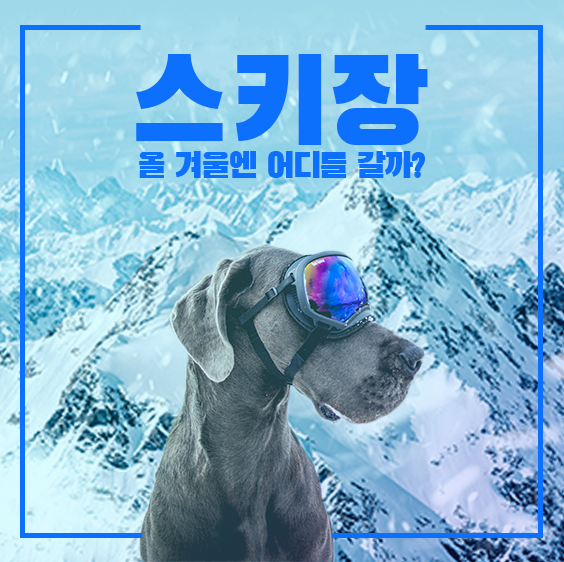
<style>
.page{position:relative;width:564px;height:562px}
.page>*{position:absolute;margin:0}
.t1{font:120px "BlackHanSans-Regular";color:#0c70fc}
.t2{font:35px "BlackHanSans-Regular";letter-spacing:-0.05em;color:#0c70fc}
</style>
<div class="page">
<p class="t1" style="left:136px;top:54px;width:292px;height:91px">스키장</p>
<p class="t2" style="left:139px;top:151px;width:286px;height:27px">올 겨울엔 어디를 갈까?</p>
</div>
